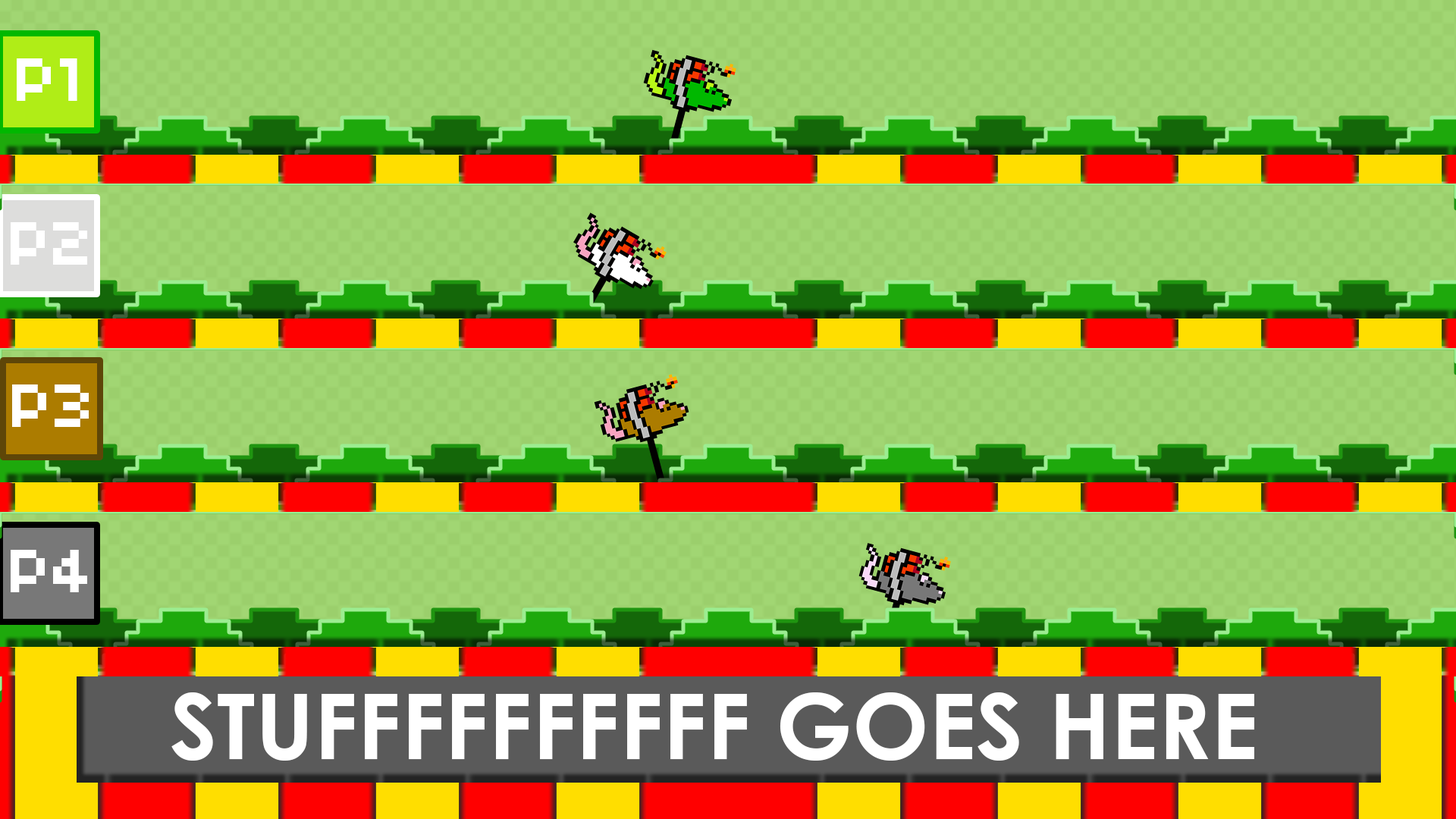
<style>
.page{position:relative;width:1456px;height:819px}
.page>*{position:absolute;margin:0}
.t1{font:68.2px "04b03";color:#ffffff}
.t2{font:91px "CenturyGothic-Bold";color:#ffffff}
</style>
<div class="page">
<p class="t1" style="left:17px;top:58px;width:60px;height:43px">P1</p>
<p class="t1" style="left:11px;top:222px;width:76px;height:43px">P2</p>
<p class="t1" style="left:12px;top:384px;width:77px;height:43px">P3</p>
<p class="t1" style="left:11px;top:550px;width:76px;height:42px">P4</p>
<p class="t2" style="left:171px;top:692px;width:1083px;height:69px">STUFFFFFFFFFF GOES HERE</p>
</div>
